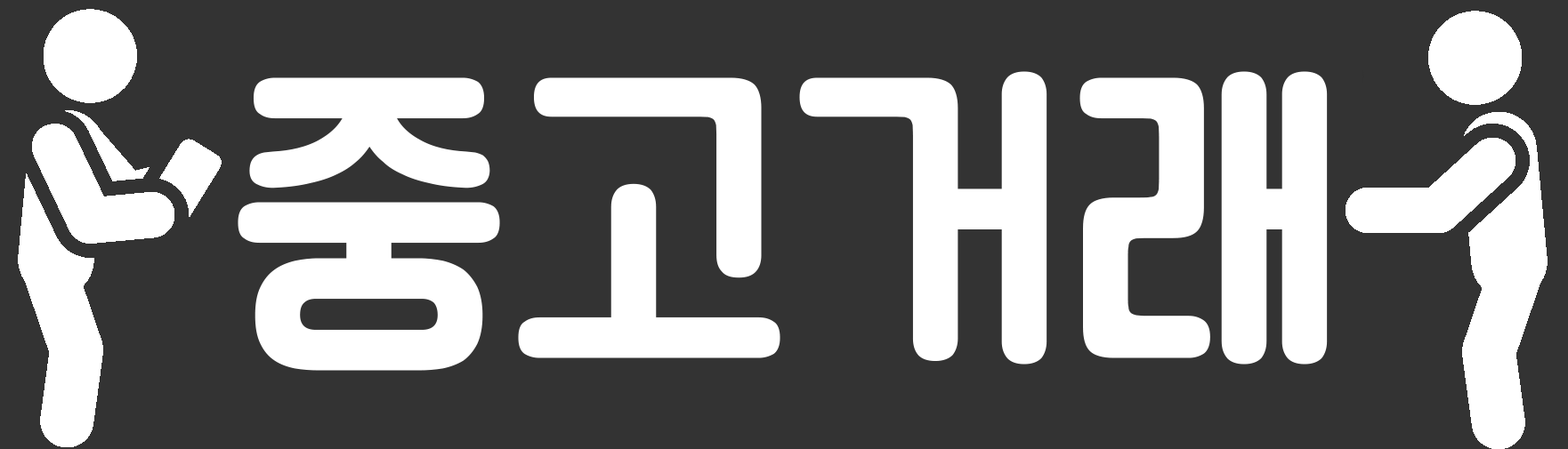
<style>
.page{position:relative;width:1568px;height:449px;background:#333333}
.page>*{position:absolute;margin:0}
.t1{font:311.5px "OTChungchunsidaeR";color:#ffffff}
</style>
<div class="page">
<p class="t1" style="left:238px;top:71px;width:1090px;height:300px">중고거래</p>
</div>
